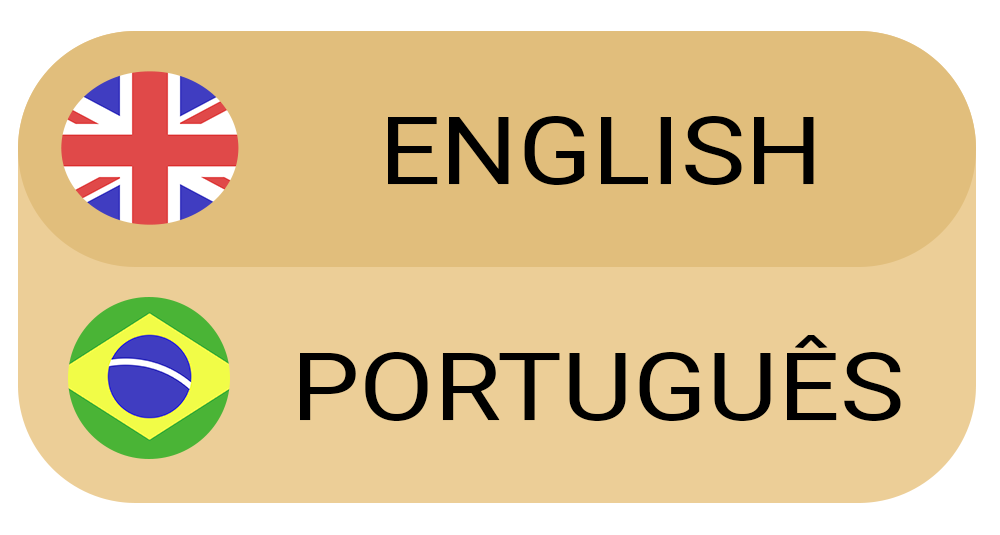
<style>
.page{position:relative;width:1000px;height:535px;background:#ecce97}
.page>*{position:absolute;margin:0}
.t1{font:94.4px "Roboto-Regular";color:#000000;scale:1.15 1}
</style>
<div class="page">
<p class="t1" style="left:388px;top:116px;width:426px;height:69px">ENGLISH</p>
<p class="t1" style="left:300px;top:335px;width:601px;height:86px">PORTUGUÊS</p>
</div>
